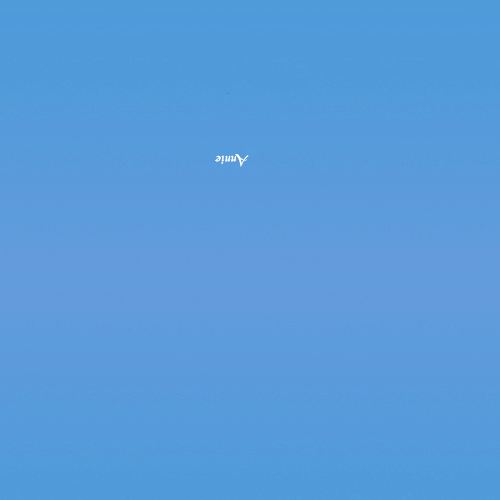
<style>
.page{position:relative;width:500px;height:500px}
.page>*{position:absolute;margin:0}
.t1{font:14px "MTOChancery";color:#ffffff;font-style:italic}
</style>
<div class="page">
<p class="t1" style="left:215px;top:154px;width:34px;height:13px;rotate:-180deg">Annie</p>
</div>
